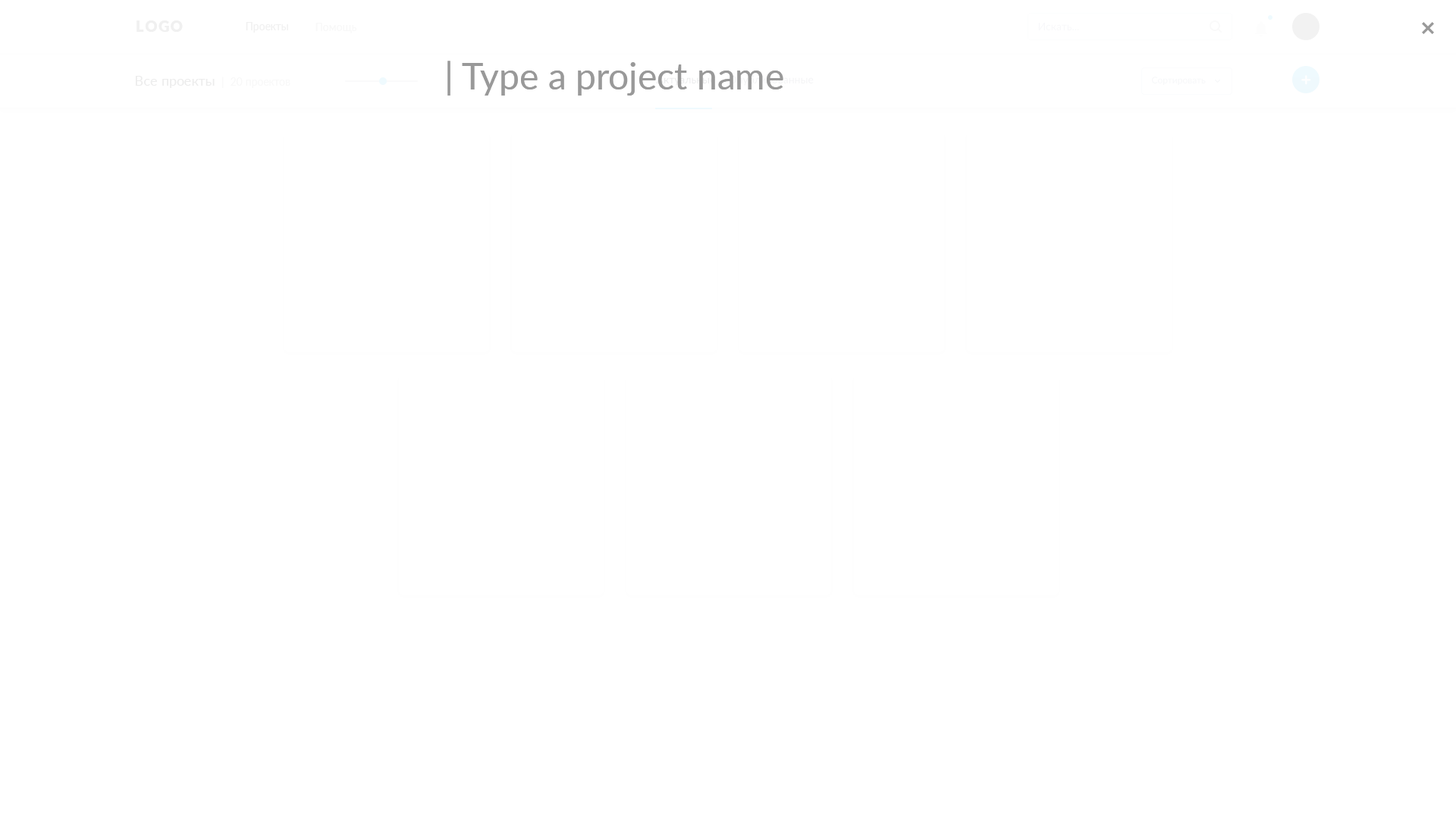
<style>
.page{position:relative;width:1456px;height:819px;background:#ffffff}
.page>*{position:absolute;margin:0}
.t1{font:15.2px "Lato-Black";letter-spacing:0.08em;color:#f0f0f0;text-transform:uppercase}
.t2{font:10.6px "Lato-Regular";color:#f0f0f0}
.t3{font:10.6px "Lato-Regular";color:#f8f8f8}
.t4{font:10.6px "Lato-Regular";color:#f8f8fa}
.t5{font:36.4px "Lato-Regular";color:#999999}
.t6{font:13.6px "Lato-Regular";color:#ececec}
.t7{font:9.1px "Lato-Regular";color:#f6f7f8}
</style>
<div class="page">
<p class="t1" style="left:136px;top:20px;width:47px;height:12px">logo</p>
<p class="t2" style="left:246px;top:22px;width:42px;height:11px">Проекты</p>
<p class="t3" style="left:315px;top:23px;width:41px;height:10px">Помощь</p>
<p class="t4" style="left:1038px;top:23px;width:41px;height:7px">Искать...</p>
<p class="t5" style="left:447px;top:61px;width:336px;height:35px">| Type a project name</p>
<p class="t6" style="left:135px;top:76px;width:80px;height:12px">Все проекты</p>
<p class="t3" style="left:222px;top:77px;width:68px;height:11px">|  20 проектов</p>
<p class="t7" style="left:1152px;top:77px;width:54px;height:8px">Сортировать</p>
</div>
